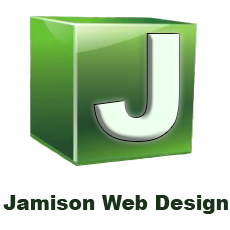
<style>
.page{position:relative;width:230px;height:230px;background:#ffffff}
.page>*{position:absolute;margin:0}
.t1{font:150px "Arial-Black";color:#edffed}
.t2{font:20px "Arial-Black";color:#193219}
</style>
<div class="page">
<p class="t1" style="left:93px;top:33px;width:87px;height:109px">J</p>
<p class="t2" style="left:3px;top:195px;width:225px;height:19px">Jamison Web Design</p>
</div>
